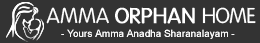
<style>
.page{position:relative;width:260px;height:43px;background:#333333}
.page>*{position:absolute;margin:0}
.t1{font:21px "Folks-Normal";color:#ffffff;text-transform:uppercase;font-weight:bold}
.t2{font:21px "Folks-Normal";color:#ffffff;text-transform:uppercase}
</style>
<div class="page">
<p class="t1" style="left:46px;top:7px;width:210px;height:17px"><span class="t2">Amma </span>Orphan <span class="t2">Home</span></p>
</div>
